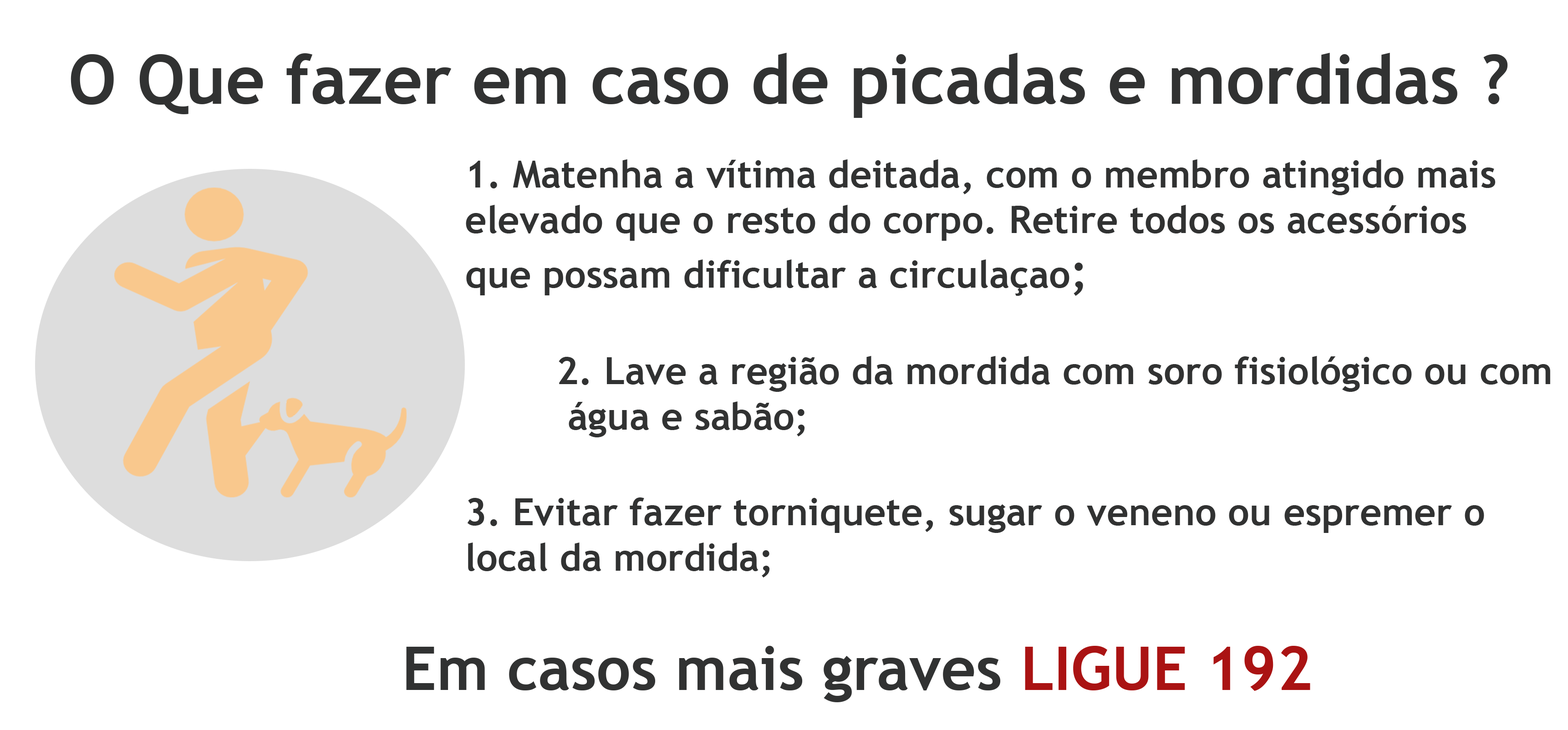
<style>
.page{position:relative;width:1568px;height:730px;background:#ffffff}
.page>*{position:absolute;margin:0}
.t1{font:68.3px "TrebuchetMS-Bold";color:#313232}
.t2{font:37.9px "TrebuchetMS-Bold";color:#313232}
.t3{font:45.5px "TrebuchetMS-Bold";color:#313232}
.t4{font:60.7px "TrebuchetMS-Bold";color:#313232}
.t5{font:60.7px "TrebuchetMS-Bold";color:#aa1313}
</style>
<div class="page">
<p class="t1" style="left:71px;top:53px;width:1437px;height:65px">O Que fazer em caso de picadas e mordidas ?</p>
<p class="t2" style="left:466px;top:159px;width:1030px;height:137px">1. Matenha a vítima deitada, com o membro atingido mais <br>elevado que o resto do corpo. Retire todos os acessórios <br>que possam dificultar a circulaçao<span class="t3">;</span></p>
<p class="t2" style="left:559px;top:356px;width:991px;height:82px">2. Lave a região da mordida com soro fisiológico ou com<br> água e sabão;</p>
<p class="t2" style="left:467px;top:498px;width:1017px;height:80px">3. Evitar fazer torniquete, sugar o veneno ou espremer o <br>local da mordida;</p>
<p class="t4" style="left:406px;top:646px;width:904px;height:57px">Em casos mais graves<span class="t5"> LIGUE 192</span></p>
</div>
